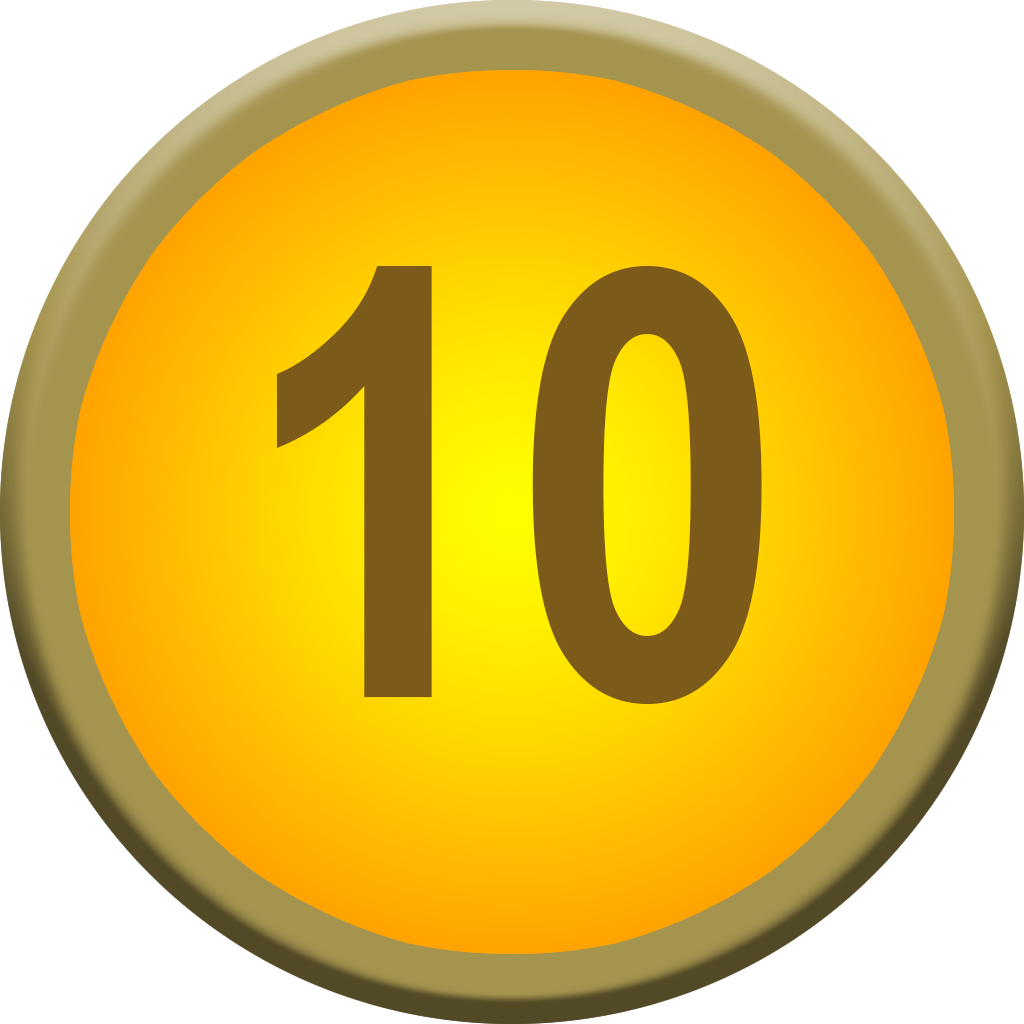
<style>
.page{position:relative;width:1024px;height:1024px;background:#ffffff}
.page>*{position:absolute;margin:0}
.t1{font:600px "ArialNarrow-Bold";color:#7c5a19}
</style>
<div class="page">
<p class="t1" style="left:276px;top:266px;width:486px;height:438px">10</p>
</div>
